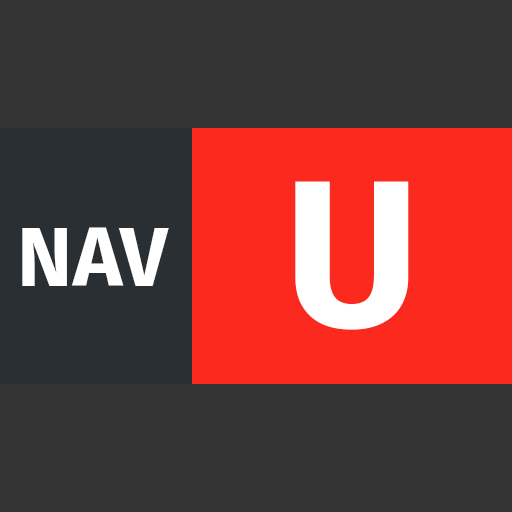
<style>
.page{position:relative;width:512px;height:512px;background:#333333}
.page>*{position:absolute;margin:0}
.t1{font:208.3px "FiraSans-Bold";color:#ffffff}
.t2{font:83.3px "FiraSans-Bold";color:#ffffff}
</style>
<div class="page">
<p class="t1" style="left:295px;top:181px;width:114px;height:149px">U</p>
<p class="t2" style="left:22px;top:227px;width:147px;height:59px">NAV</p>
</div>
